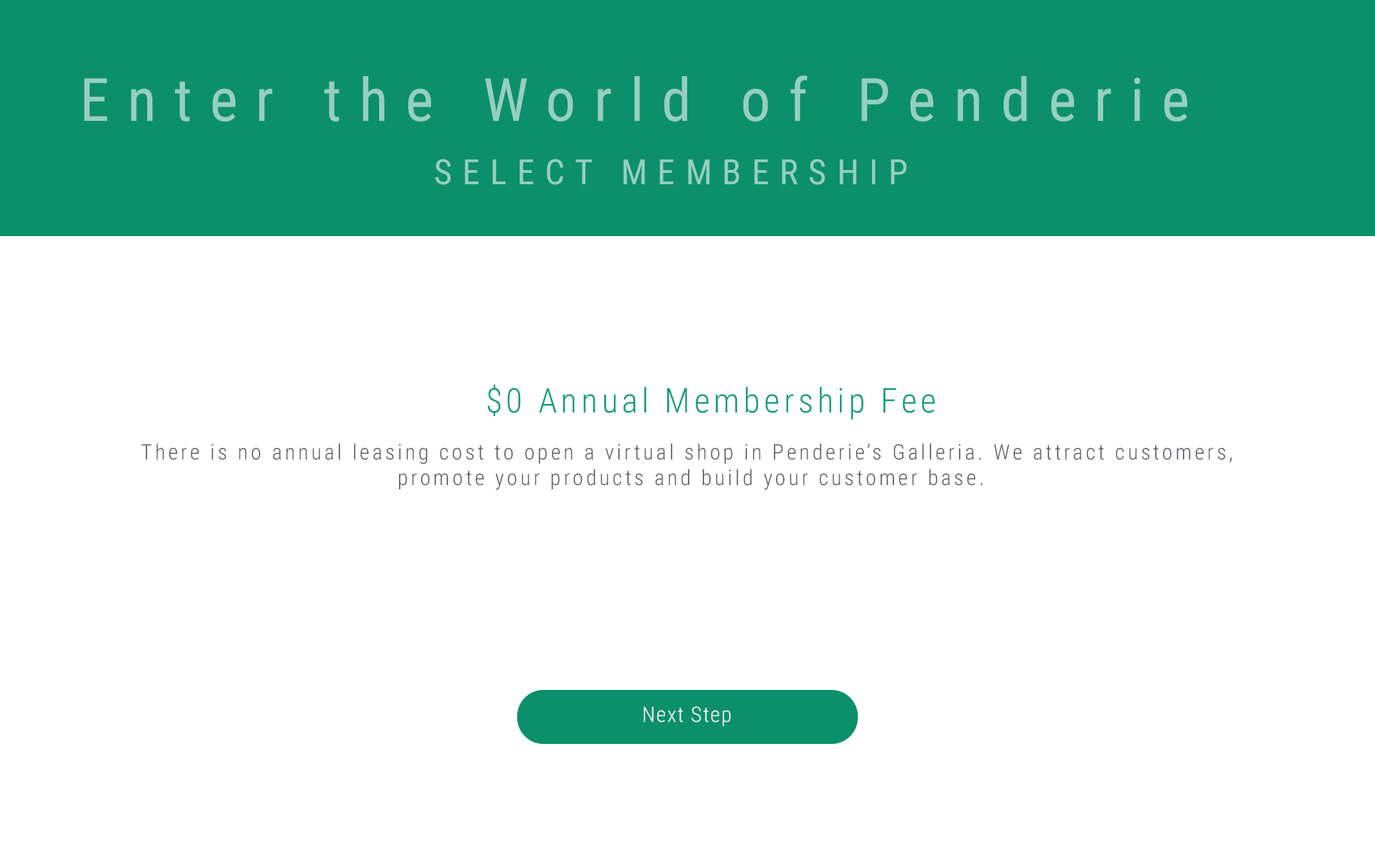
<style>
.page{position:relative;width:1375px;height:867px;background:#ffffff}
.page>*{position:absolute;margin:0}
.t1{font:59.8px "RobotoCondensed-Regular";letter-spacing:0.3em;color:#96cfbf}
.t2{font:34.9px "RobotoCondensed-Regular";letter-spacing:0.3em;color:#96cfbf}
.t3{font:34.1px "RobotoCondensed-Light";letter-spacing:0.115em;color:#0a9c7c}
.t4{font:21.3px/25.6px "RobotoCondensed-Light";letter-spacing:0.135em;color:#53585f}
.t5{font:21.3px "RobotoCondensed-Light";letter-spacing:0.055em;color:#ffffff}
</style>
<div class="page">
<p class="t1" style="left:84px;top:75px;width:1103px;height:47px">Enter the World of Penderie</p>
<p class="t2" style="left:435px;top:159px;width:472px;height:26px">SELECT MEMBERSHIP</p>
<p class="t3" style="left:487px;top:384px;width:448px;height:36px">$0 Annual Membership Fee</p>
<p class="t4" style="left:142px;top:443px;width:1090px;height:47px;text-align:center">There is no annual leasing cost to open a virtual shop in Penderie’s Galleria. We attract customers, <br>promote your products and build your customer base.</p>
<p class="t5" style="left:644px;top:706px;width:87px;height:20px">Next Step</p>
</div>
